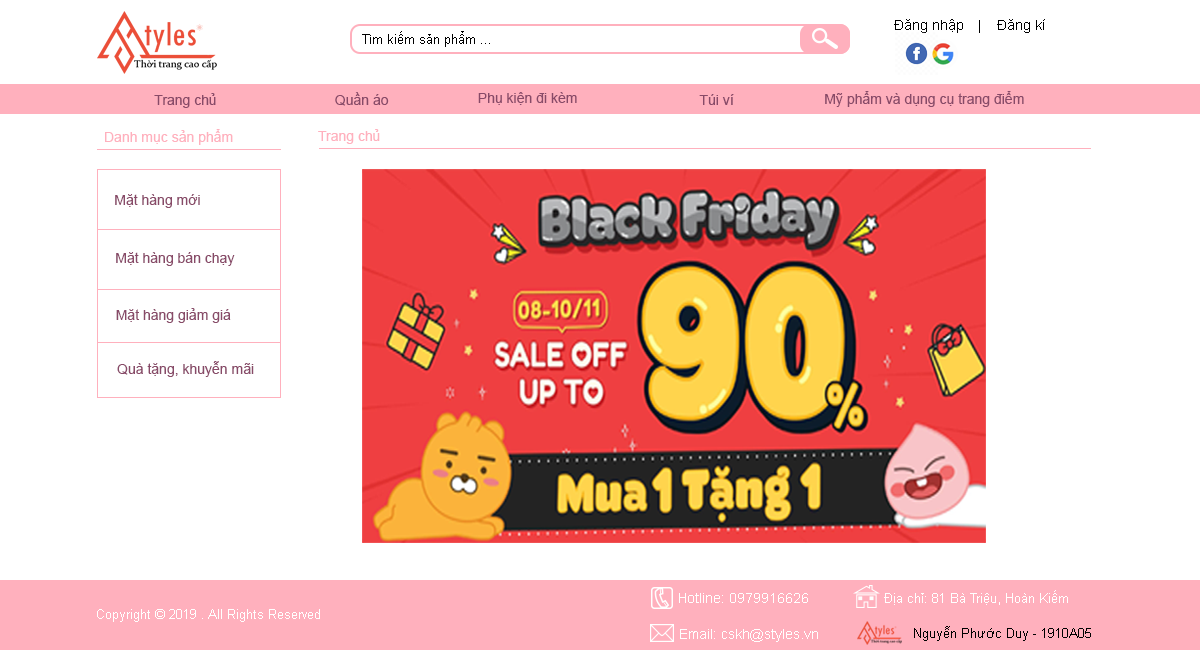
<style>
.page{position:relative;width:1200px;height:650px;background:#ffffff}
.page>*{position:absolute;margin:0}
.t1{font:14px "ArialMT";color:#000000}
.t2{font:13px "ArialMT";color:#000000}
.t3{font:14px "ArialMT";color:#884a68}
.t4{font:14px "ArialMT";color:#ffb0bd}
.t5{font:13px "ArialMT";color:#ffffff}
</style>
<div class="page">
<p class="t1" style="left:894px;top:19px;width:151px;height:14px">Đăng nhập    |    Đăng kí</p>
<p class="t2" style="left:362px;top:31px;width:128px;height:16px">Tìm kiếm sản phẩm ...</p>
<p class="t3" style="left:154px;top:93px;width:62px;height:15px">Trang chủ</p>
<p class="t3" style="left:335px;top:92px;width:54px;height:14px">Quần áo</p>
<p class="t3" style="left:478px;top:92px;width:99px;height:13px">Phụ kiện đi kèm</p>
<p class="t3" style="left:699px;top:94px;width:35px;height:11px">Túi ví</p>
<p class="t3" style="left:825px;top:91px;width:199px;height:16px">Mỹ phẩm và dụng cụ trang điểm</p>
<p class="t4" style="left:105px;top:129px;width:128px;height:16px">Danh mục sản phẩm</p>
<p class="t4" style="left:318px;top:129px;width:62px;height:15px">Trang chủ</p>
<p class="t3" style="left:115px;top:194px;width:85px;height:14px">Mặt hàng mới</p>
<p class="t3" style="left:116px;top:252px;width:119px;height:14px">Mặt hàng bán chạy</p>
<p class="t3" style="left:116px;top:308px;width:115px;height:15px">Mặt hàng giảm giá</p>
<p class="t3" style="left:117px;top:361px;width:137px;height:16px">Quà tặng, khuyễn mãi</p>
<p class="t5" style="left:97px;top:609px;width:223px;height:13px">Copyright © 2019 . All Rights Reserved</p>
</div>
